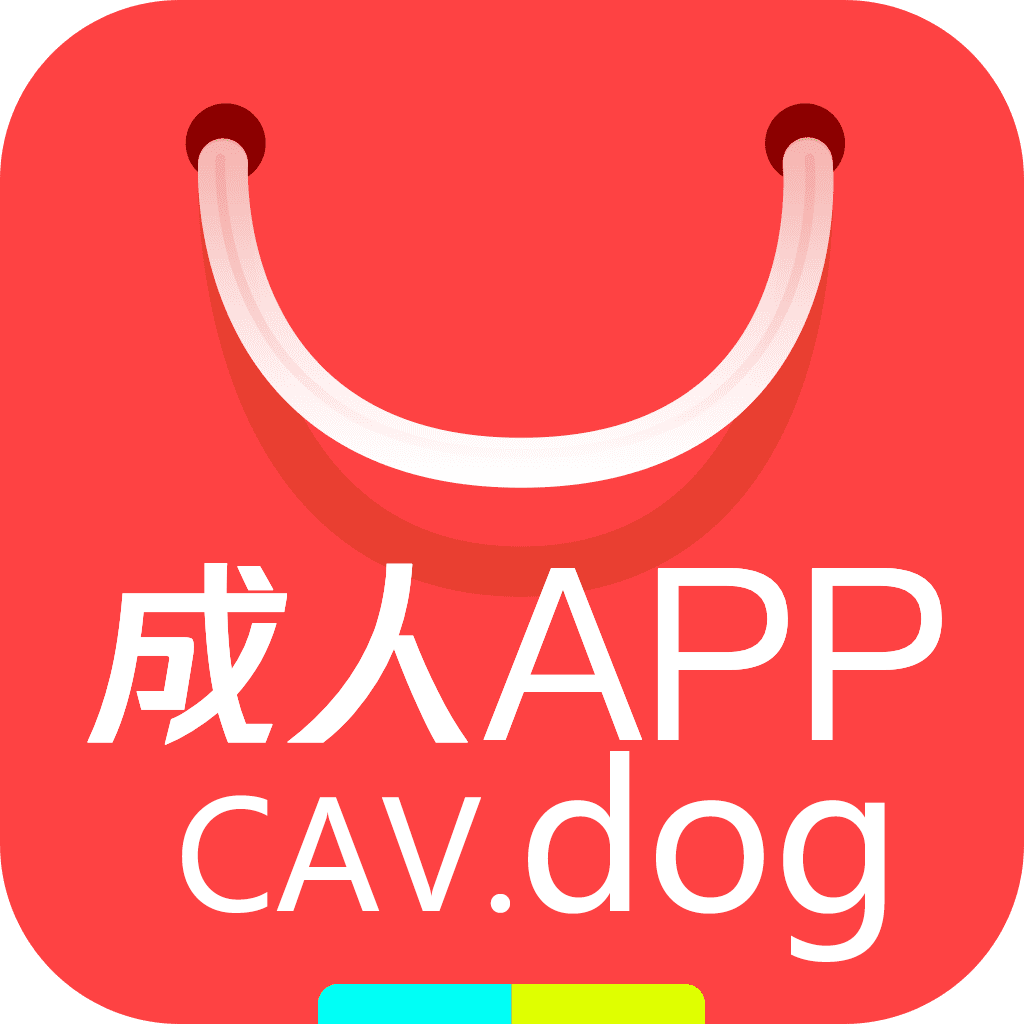
<style>
.page{position:relative;width:1024px;height:1024px;background:#fe4243}
.page>*{position:absolute;margin:0}
.t1{font:200px "FontName";color:#ffffff}
.t2{font:240px "PingFangSC-Regular";color:#ffffff}
.t3{font:150px "MicrosoftYaHei";color:#ffffff}
.t4{font:200px "MicrosoftYaHei";color:#ffffff}
</style>
<div class="page">
<p class="t1" style="left:87px;top:563px;width:381px;height:182px">成人</p>
<p class="t2" style="left:483px;top:568px;width:459px;height:172px">APP</p>
<p class="t3" style="left:182px;top:751px;width:703px;height:211px">CAV.<span class="t4">dog</span></p>
</div>
